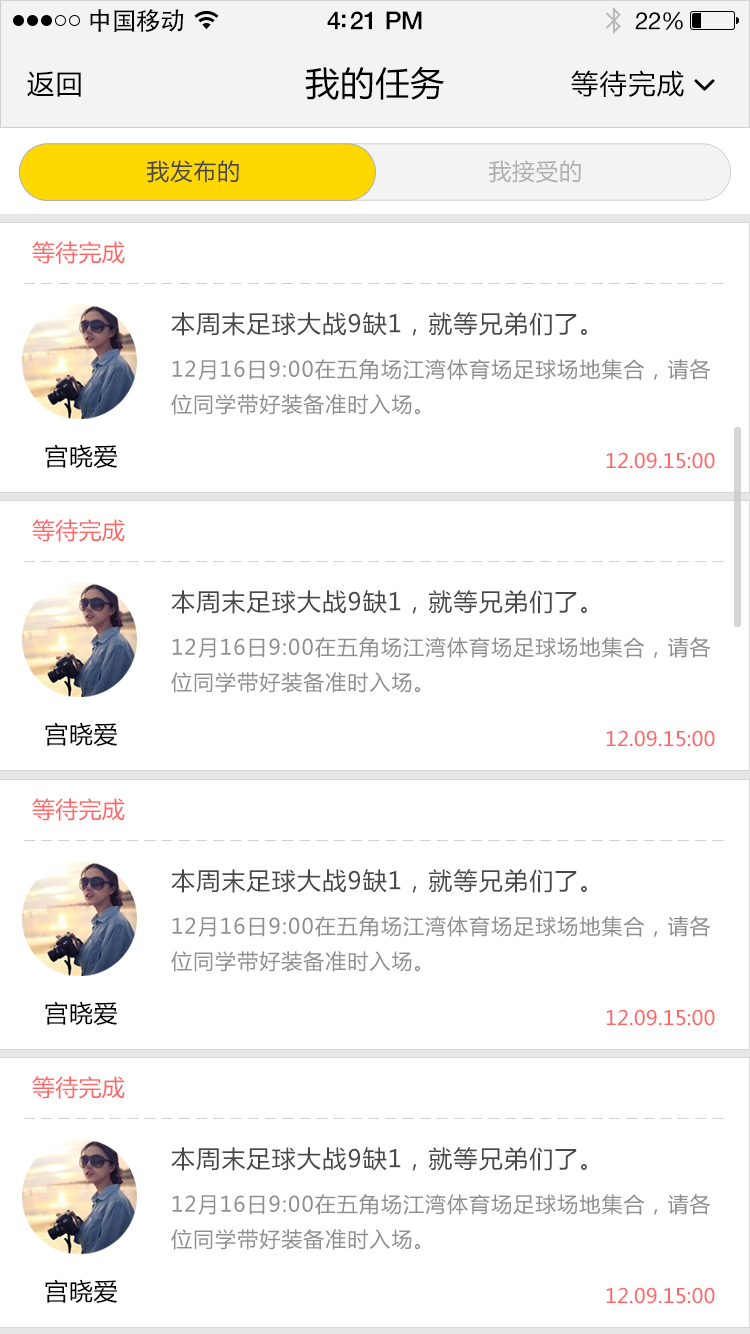
<style>
.page{position:relative;width:750px;height:1334px;background:#ffffff}
.page>*{position:absolute;margin:0}
.t1{font:25px "AdobeHeitiStd-Regular";letter-spacing:-0.025em;color:#000000}
.t2{font:25px "HelveticaNeue-Medium";letter-spacing:-0.02em;color:#000000}
.t3{font:24px "HelveticaNeue";letter-spacing:-0.02em;color:#000000}
.t4{font:27px "MicrosoftYaHei";letter-spacing:0.05em;color:#000000}
.t5{font:34px "MicrosoftYaHei";letter-spacing:0.03em;color:#000000}
.t6{font:23px "MicrosoftYaHei";letter-spacing:0.03em;color:#484848}
.t7{font:23px "MicrosoftYaHei";letter-spacing:0.03em;color:#b0b0b0}
.t8{font:23px "MicrosoftYaHei";letter-spacing:0.01em;color:#ff6666}
.t9{font:24px "MicrosoftYaHei";letter-spacing:0.05em;color:#555555}
.t10{font:21px/35px "MicrosoftYaHei";letter-spacing:0.05em;color:#8e8e8e}
.t11{font:24px "MicrosoftYaHei";letter-spacing:0.03em;color:#000000}
.t12{font:20px "MicrosoftYaHei";letter-spacing:0.01em;color:#ff6666}
</style>
<div class="page">
<p class="t1" style="left:90px;top:9px;width:94px;height:23px">中国移动</p>
<p class="t2" style="left:327px;top:11px;width:95px;height:19px">4:21 PM</p>
<p class="t3" style="left:635px;top:12px;width:48px;height:18px">22%</p>
<p class="t4" style="left:27px;top:71px;width:54px;height:26px">返回</p>
<p class="t5" style="left:305px;top:66px;width:139px;height:34px">我的任务</p>
<p class="t4" style="left:571px;top:70px;width:113px;height:27px">等待完成</p>
<p class="t6" style="left:146px;top:160px;width:93px;height:23px">我发布的</p>
<p class="t7" style="left:488px;top:160px;width:93px;height:23px">我接受的</p>
<p class="t8" style="left:32px;top:241px;width:93px;height:23px">等待完成</p>
<p class="t9" style="left:171px;top:312px;width:416px;height:24px">本周末足球大战9缺1，就等兄弟们了。</p>
<p class="t10" style="left:171px;top:359px;width:540px;height:56px">12月16日9:00在五角场江湾体育场足球场地集合，请各<br>位同学带好装备准时入场。</p>
<p class="t11" style="left:45px;top:444px;width:73px;height:24px">宫晓爱</p>
<p class="t12" style="left:606px;top:452px;width:109px;height:17px">12.09.15:00</p>
<p class="t8" style="left:32px;top:519px;width:93px;height:23px">等待完成</p>
<p class="t9" style="left:171px;top:590px;width:416px;height:24px">本周末足球大战9缺1，就等兄弟们了。</p>
<p class="t10" style="left:171px;top:637px;width:540px;height:56px">12月16日9:00在五角场江湾体育场足球场地集合，请各<br>位同学带好装备准时入场。</p>
<p class="t11" style="left:45px;top:722px;width:73px;height:24px">宫晓爱</p>
<p class="t12" style="left:606px;top:730px;width:109px;height:17px">12.09.15:00</p>
<p class="t8" style="left:32px;top:798px;width:93px;height:23px">等待完成</p>
<p class="t9" style="left:171px;top:869px;width:416px;height:24px">本周末足球大战9缺1，就等兄弟们了。</p>
<p class="t10" style="left:171px;top:916px;width:540px;height:56px">12月16日9:00在五角场江湾体育场足球场地集合，请各<br>位同学带好装备准时入场。</p>
<p class="t11" style="left:45px;top:1001px;width:73px;height:24px">宫晓爱</p>
<p class="t12" style="left:606px;top:1009px;width:109px;height:17px">12.09.15:00</p>
<p class="t8" style="left:32px;top:1076px;width:93px;height:23px">等待完成</p>
<p class="t9" style="left:171px;top:1147px;width:416px;height:24px">本周末足球大战9缺1，就等兄弟们了。</p>
<p class="t10" style="left:171px;top:1194px;width:540px;height:56px">12月16日9:00在五角场江湾体育场足球场地集合，请各<br>位同学带好装备准时入场。</p>
<p class="t11" style="left:45px;top:1279px;width:73px;height:24px">宫晓爱</p>
<p class="t12" style="left:606px;top:1287px;width:109px;height:17px">12.09.15:00</p>
</div>
